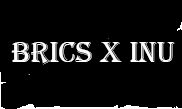
<style>
.page{position:relative;width:182px;height:109px;background:#000000}
.page>*{position:absolute;margin:0}
.t1{font:30px "Algerian";color:#ffffff;text-transform:uppercase}
</style>
<div class="page">
<p class="t1" style="left:11px;top:42px;width:164px;height:23px">BRICS X INU</p>
</div>
